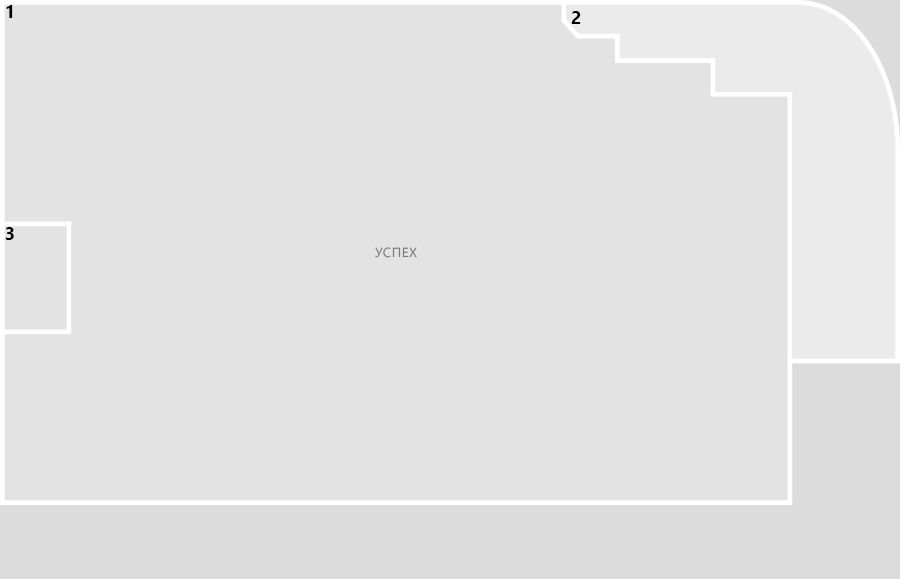
<style>
.page{position:relative;width:900px;height:579px;background:#e3e3e3}
.page>*{position:absolute;margin:0}
.t1{font:18px "SegoeUI-Bold";letter-spacing:0.05em;color:#000000;text-transform:uppercase}
.t2{font:13.1px "SegoeUI";letter-spacing:0.05em;color:#7c7c7c;text-transform:uppercase}
</style>
<div class="page">
<p class="t1" style="left:6px;top:5px;width:7px;height:13px">1</p>
<p class="t1" style="left:571px;top:11px;width:10px;height:13px">2</p>
<p class="t1" style="left:5px;top:227px;width:9px;height:13px">3</p>
<p class="t2" style="left:375px;top:247px;width:42px;height:11px">Успех</p>
</div>
